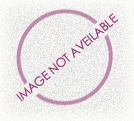
<style>
.page{position:relative;width:134px;height:121px}
.page>*{position:absolute;margin:0}
.t1{font:12px "CenturyGothic";letter-spacing:-0.015em;color:#8f3771}
</style>
<div class="page">
<p class="t1" style="left:16px;top:13px;width:102px;height:89px;rotate:-40deg">IMAGE NOT AVEILABLE</p>
</div>
